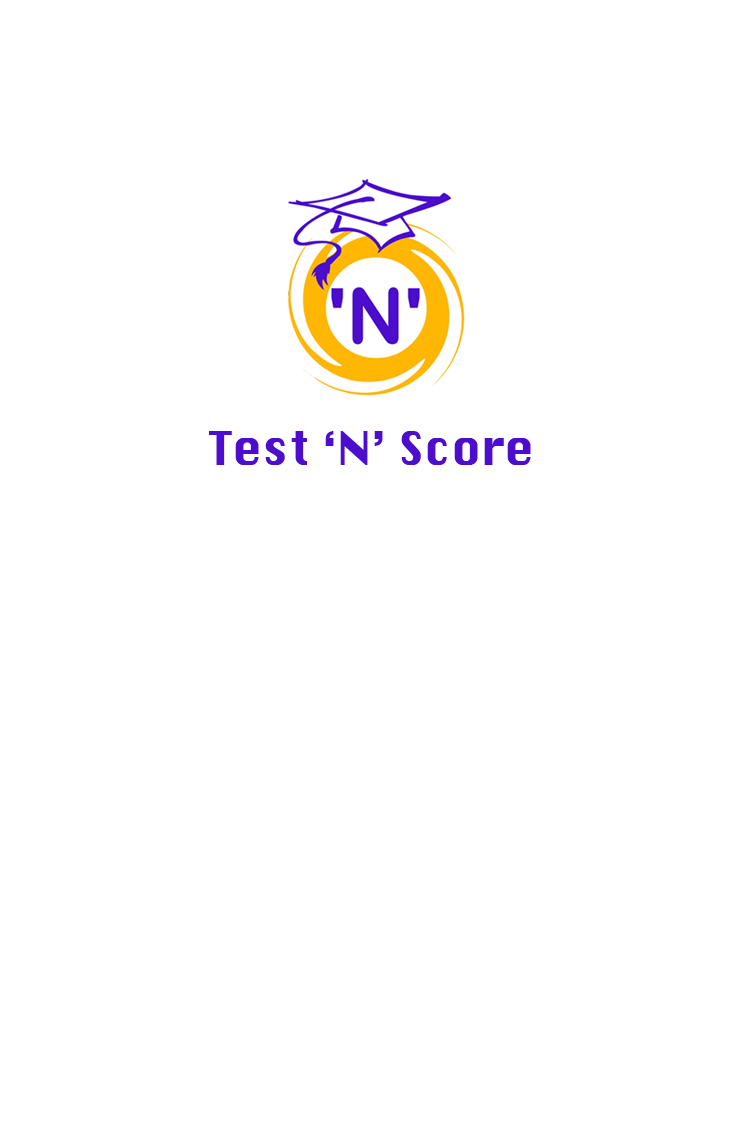
<style>
.page{position:relative;width:750px;height:1136px;background:#ffffff}
.page>*{position:absolute;margin:0}
.t1{font:45.4px "Krungthep";color:#4c0dcd}
</style>
<div class="page">
<p class="t1" style="left:209px;top:431px;width:322px;height:34px">Test ‘N’ Score</p>
</div>
